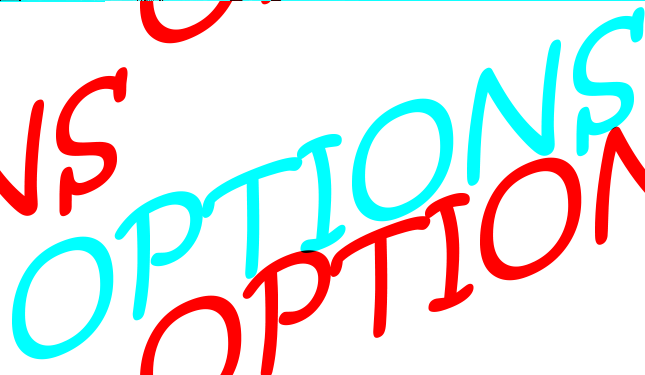
<style>
.page{position:relative;width:645px;height:375px;background:#ffffff}
.page>*{position:absolute;margin:0}
.t1{font:125px "KristenITC-Regular";scale:1.08 1}
</style>
<div class="page">
<p class="t1" style="left:7px;top:6px;width:633px;height:353px;rotate:-22deg">OPTIONS</p>
</div>
